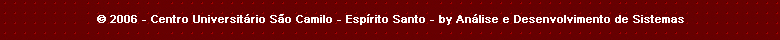
<style>
.page{position:relative;width:780px;height:40px;background:#670001}
.page>*{position:absolute;margin:0}
.t1{font:11px "ArialMT";color:#fcfafa;font-weight:bold}
</style>
<div class="page">
<p class="t1" style="left:97px;top:14px;width:587px;height:11px">© 2006 - Centro Universitário São Camilo - Espírito Santo - by Análise e Desenvolvimento de Sistemas</p>
</div>
